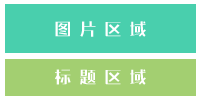
<style>
.page{position:relative;width:200px;height:100px;background:#49cfad}
.page>*{position:absolute;margin:0}
.t1{font:16.7px "Benmo-Chenhei";letter-spacing:0.5em;color:#ffffff}
</style>
<div class="page">
<p class="t1" style="left:55px;top:21px;width:91px;height:16px">图片区域</p>
<p class="t1" style="left:55px;top:69px;width:91px;height:16px">标题区域</p>
</div>
